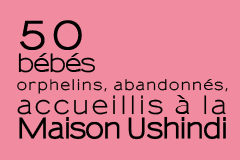
<style>
.page{position:relative;width:240px;height:160px;background:#f18ca0}
.page>*{position:absolute;margin:0}
.t1{font:14px/18px "Sansumi-Bold";letter-spacing:0.1em;color:#000000}
.t2{font:24px/25px "Sansumi-Bold";letter-spacing:-0.04em;color:#000000}
.t3{font:38.2px/25px "Sansumi-Bold";letter-spacing:0.12em;color:#000000;font-weight:bold;scale:0.93 1}
.t4{font:24px/23px "Sansumi-Bold";letter-spacing:-0.04em;color:#000000}
.t5{font:24px/24px "Sansumi-Bold";letter-spacing:0.11em;color:#000000}
.t6{font:27.3px/24px "Sansumi-Bold";letter-spacing:-0.05em;color:#000000;font-weight:bold;scale:0.91 1}
</style>
<div class="page">
<p class="t1" style="left:17px;top:20px;width:211px;height:120px"><span class="t2"><br></span><span class="t3">50<br></span><span class="t4">bébés<br></span>orphelins, abandonnés,<br><span class="t5">accueillis à la <br></span><span class="t6">Maison Ushindi</span></p>
</div>
